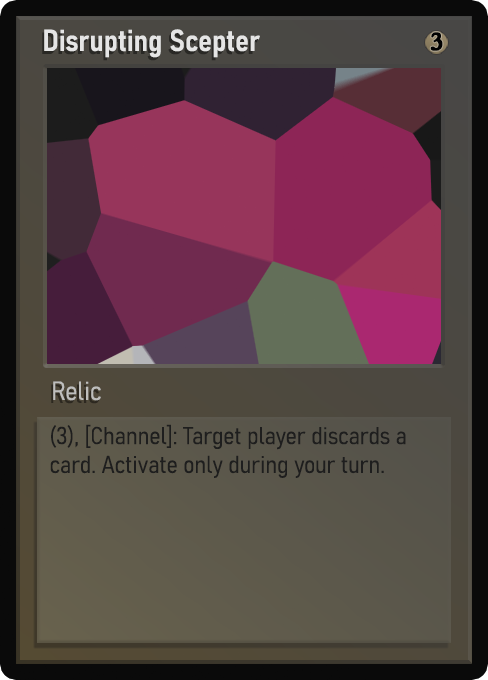
<style>
.page{position:relative;width:488px;height:680px}
.page>*{position:absolute;margin:0}
.t1{font:30px "Bahnschrift-SemiBoldSemiCondensed";color:#f2f2f2;font-weight:bold}
.t2{font:25px "WTRRoycroft";color:#000000;font-weight:bold;scale:1.09 1}
.t3{font:26px "Bahnschrift-LightSemiCondensed";color:#c8c8c8;font-weight:bold}
.t4{font:24px "Bahnschrift-LightSemiCondensed";color:#1e1e1e;font-weight:bold}
</style>
<div class="page">
<p class="t1" style="left:44px;top:29px;width:216px;height:29px;opacity:0.9">Disrupting Scepter</p>
<p class="t2" style="left:430px;top:32px;width:13px;height:19px">3</p>
<p class="t3" style="left:53px;top:381px;width:48px;height:20px;opacity:0.9">Relic</p>
<p class="t4" style="left:50px;top:424px;width:356px;height:54px">(3), [Channel]: Target player discards a card. Activate only during your turn.</p>
</div>
